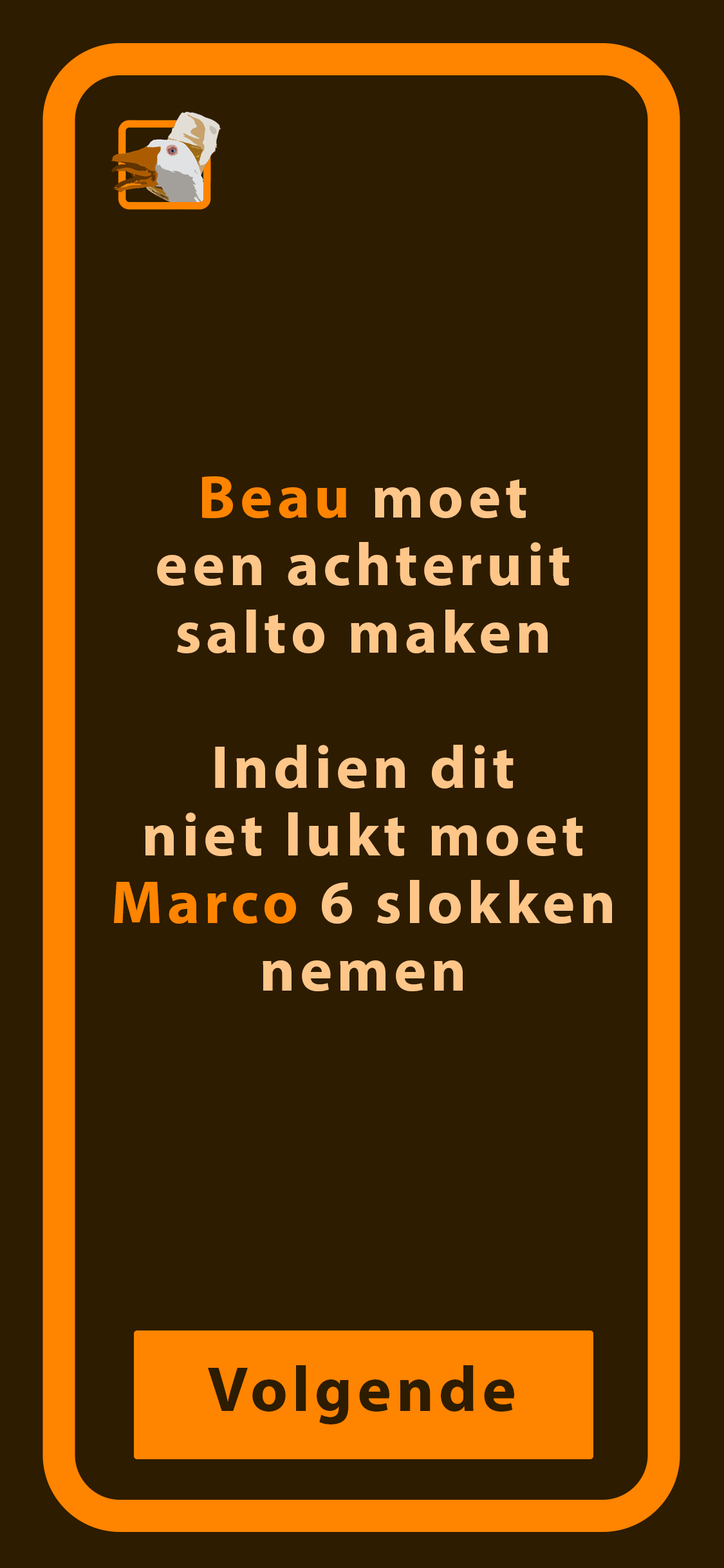
<style>
.page{position:relative;width:724px;height:1568px;background:#2d1c00}
.page>*{position:absolute;margin:0}
.t1{font:61.1px/67.6px "MyriadPro-Bold";letter-spacing:0.075em;color:#ffc689}
.t2{font:61.1px/67.6px "MyriadPro-Bold";letter-spacing:0.075em;color:#ff8400}
.t3{font:64.4px "MyriadPro-Bold";letter-spacing:0.075em;color:#2d1c00}
</style>
<div class="page">
<p class="t1" style="left:114px;top:476px;width:498px;height:515px;text-align:center"><span class="t2">Beau</span> moet<br>een achteruit<br>salto maken<br><br>Indien dit<br>niet lukt moet<br><span class="t2">Marco</span> 6 slokken<br>nemen</p>
<p class="t3" style="left:208px;top:1365px;width:306px;height:59px">Volgende</p>
</div>
